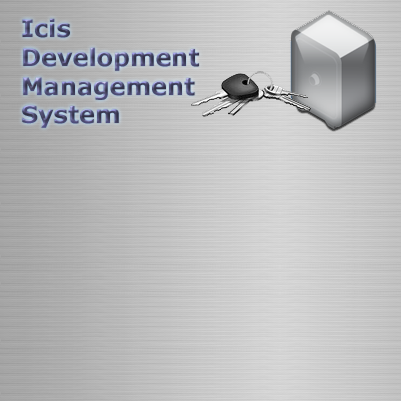
<style>
.page{position:relative;width:401px;height:401px}
.page>*{position:absolute;margin:0}
.t1{font:24px "Verdana-Bold"}
</style>
<div class="page">
<p class="t1" style="left:22px;top:18px;width:177px;height:110px">Icis<br>Development<br>Management<br>System</p>
</div>
